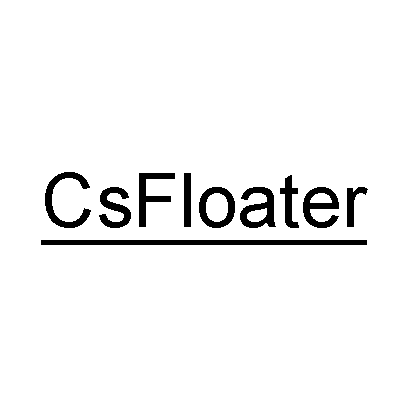
<style>
.page{position:relative;width:400px;height:400px;background:#ffffff}
.page>*{position:absolute;margin:0}
.t1{font:75px "ArialMT";color:#000000;text-decoration:underline}
</style>
<div class="page">
<p class="t1" style="left:41px;top:172px;width:327px;height:73px">CsFloater</p>
</div>
